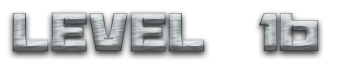
<style>
.page{position:relative;width:364px;height:64px;background:#ffffff}
.page>*{position:absolute;margin:0}
.t1{font:60px "BananaBrick"}
</style>
<div class="page">
<p class="t1" style="left:12px;top:12px;width:307px;height:40px">Level  16</p>
</div>
